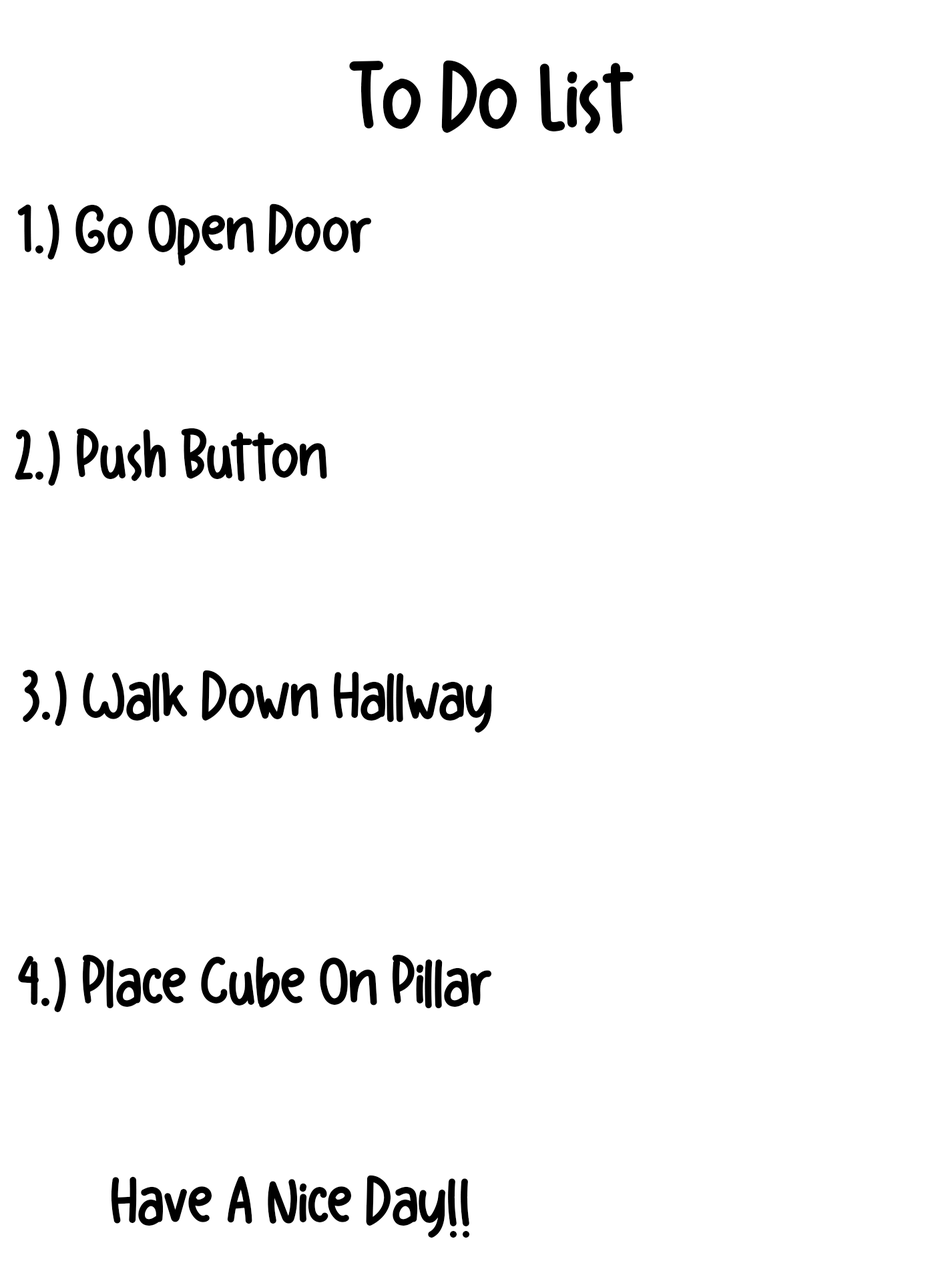
<style>
.page{position:relative;width:946px;height:1261px;background:#ffffff}
.page>*{position:absolute;margin:0}
.t1{font:100.1px "FunPlay-Regular";color:#000000}
.t2{font:69.5px "FunPlay-Regular";color:#000000}
</style>
<div class="page">
<p class="t1" style="left:349px;top:60px;width:284px;height:74px">To Do List</p>
<p class="t2" style="left:17px;top:204px;width:354px;height:62px">1.) Go Open Door</p>
<p class="t2" style="left:15px;top:428px;width:312px;height:58px">2.) Push Button</p>
<p class="t2" style="left:23px;top:669px;width:469px;height:64px">3.) Walk Down Hallway</p>
<p class="t2" style="left:18px;top:955px;width:473px;height:57px">4.) Place Cube On Pillar</p>
<p class="t2" style="left:111px;top:1175px;width:359px;height:63px">Have A Nice Day!!</p>
</div>
